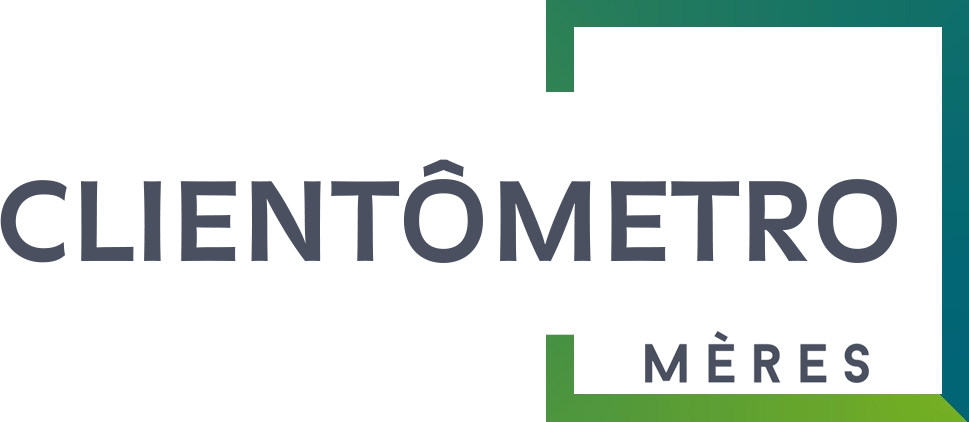
<style>
.page{position:relative;width:969px;height:422px;background:#ffffff}
.page>*{position:absolute;margin:0}
.t1{font:107.8px "Balance-Bold";color:#4a5060;scale:1.08 1}
</style>
<div class="page">
<p class="t1" style="left:0px;top:159px;width:897px;height:104px">CLIENTÔMETRO</p>
</div>
